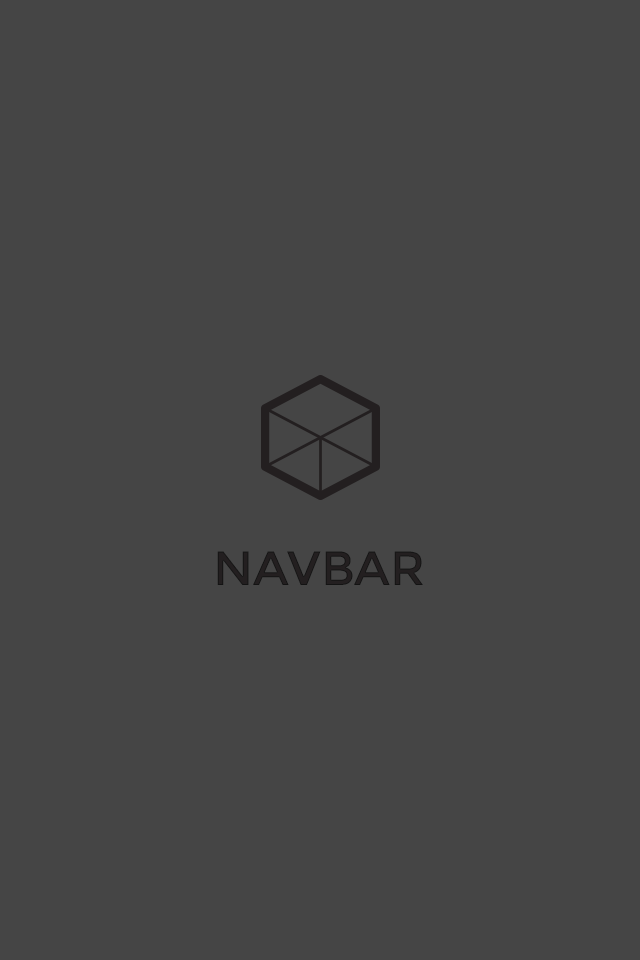
<style>
.page{position:relative;width:640px;height:960px;background:#454545}
.page>*{position:absolute;margin:0}
.t1{font:48px "Montserrat-Regular";color:#231f20}
</style>
<div class="page">
<p class="t1" style="left:217px;top:551px;width:206px;height:34px">NAVBAR</p>
</div>
